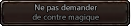
<style>
.page{position:relative;width:131px;height:26px}
.page>*{position:absolute;margin:0}
.t1{font:8px "LaoUI"}
</style>
<div class="page">
<p class="t1" style="left:32px;top:4px;width:67px;height:18px;text-align:center">Ne pas demander<br>de contre magique</p>
</div>
